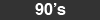
<style>
.page{position:relative;width:100px;height:20px;background:#333333}
.page>*{position:absolute;margin:0}
.t1{font:16px "Helvetica-Bold";letter-spacing:0.005em;color:#ffffff}
</style>
<div class="page">
<p class="t1" style="left:35px;top:3px;width:31px;height:12px">90’s</p>
</div>
